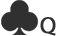
<style>
.page{position:relative;width:58px;height:36px;background:#ffffff}
.page>*{position:absolute;margin:0}
.t1{font:23.4px "MyriadPro-Regular";letter-spacing:-0.1em;color:#303030;font-weight:bold}
</style>
<div class="page">
<p class="t1" style="left:40px;top:17px;width:16px;height:19px">Q</p>
</div>
